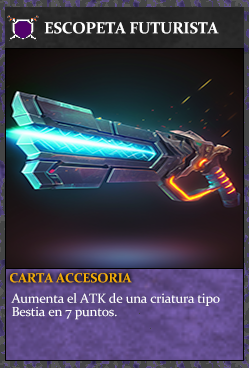
<style>
.page{position:relative;width:249px;height:368px}
.page>*{position:absolute;margin:0}
.t1{font:16px "Constantia-Bold";letter-spacing:-0.02em;color:#ffffff}
.t2{font:13.3px "Constantia-Bold";letter-spacing:-0.02em;color:#f2ac05}
.t3{font:13.3px/13.3px "Constantia";letter-spacing:-0.02em;color:#ffffff}
</style>
<div class="page">
<p class="t1" style="left:44px;top:22px;width:175px;height:12px">ESCOPETA FUTURISTA</p>
<p class="t2" style="left:10px;top:273px;width:122px;height:10px">CARTA ACCESORIA</p>
<p class="t3" style="left:11px;top:293px;width:209px;height:27px">Aumenta el ATK de una criatura tipo<br>Bestia en 7 puntos.</p>
</div>
